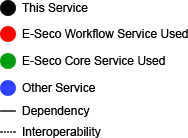
<style>
.page{position:relative;width:188px;height:138px;background:#ffffff}
.page>*{position:absolute;margin:0}
.t1{font:12px "ArialMT";color:#000000}
</style>
<div class="page">
<p class="t1" style="left:22px;top:3px;width:66px;height:9px">This Service</p>
<p class="t1" style="left:22px;top:29px;width:166px;height:9px">E-Seco Workflow Service Used</p>
<p class="t1" style="left:22px;top:56px;width:143px;height:9px">E-Seco Core Service Used</p>
<p class="t1" style="left:22px;top:83px;width:73px;height:9px">Other Service</p>
<p class="t1" style="left:22px;top:106px;width:68px;height:11px">Dependency</p>
<p class="t1" style="left:23px;top:127px;width:78px;height:11px">Interoperability</p>
</div>
